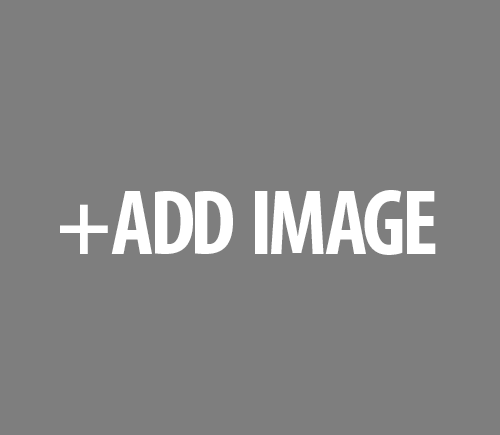
<style>
.page{position:relative;width:500px;height:435px;background:#7e7e7e}
.page>*{position:absolute;margin:0}
.t1{font:92.8px "MyriadPro-BoldCond";color:#ffffff;text-transform:uppercase}
</style>
<div class="page">
<p class="t1" style="left:60px;top:190px;width:376px;height:65px">+ ADD IMAGE</p>
</div>
